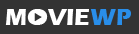
<style>
.page{position:relative;width:139px;height:34px;background:#333333}
.page>*{position:absolute;margin:0}
.t1{font:24px "ErasITC-Bold";color:#ffffff}
.t2{font:24px "ErasITC-Bold";color:#298eea}
</style>
<div class="page">
<p class="t1" style="left:5px;top:9px;width:126px;height:16px">MOVIE<span class="t2">WP</span></p>
</div>
